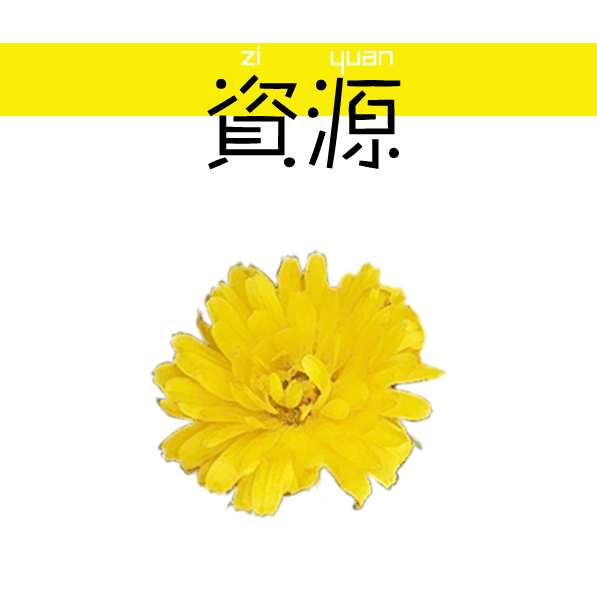
<style>
.page{position:relative;width:597px;height:597px;background:#ffffff}
.page>*{position:absolute;margin:0}
.t1{font:43.1px "FZZHYFW--GB1-0";color:#ffffff;scale:0.94 1}
.t2{font:103.1px "FZZHYFW--GB1-0";color:#000000}
</style>
<div class="page">
<p class="t1" style="left:241px;top:45px;width:152px;height:30px">zi    yuan</p>
<p class="t2" style="left:207px;top:74px;width:194px;height:96px">资源</p>
</div>
